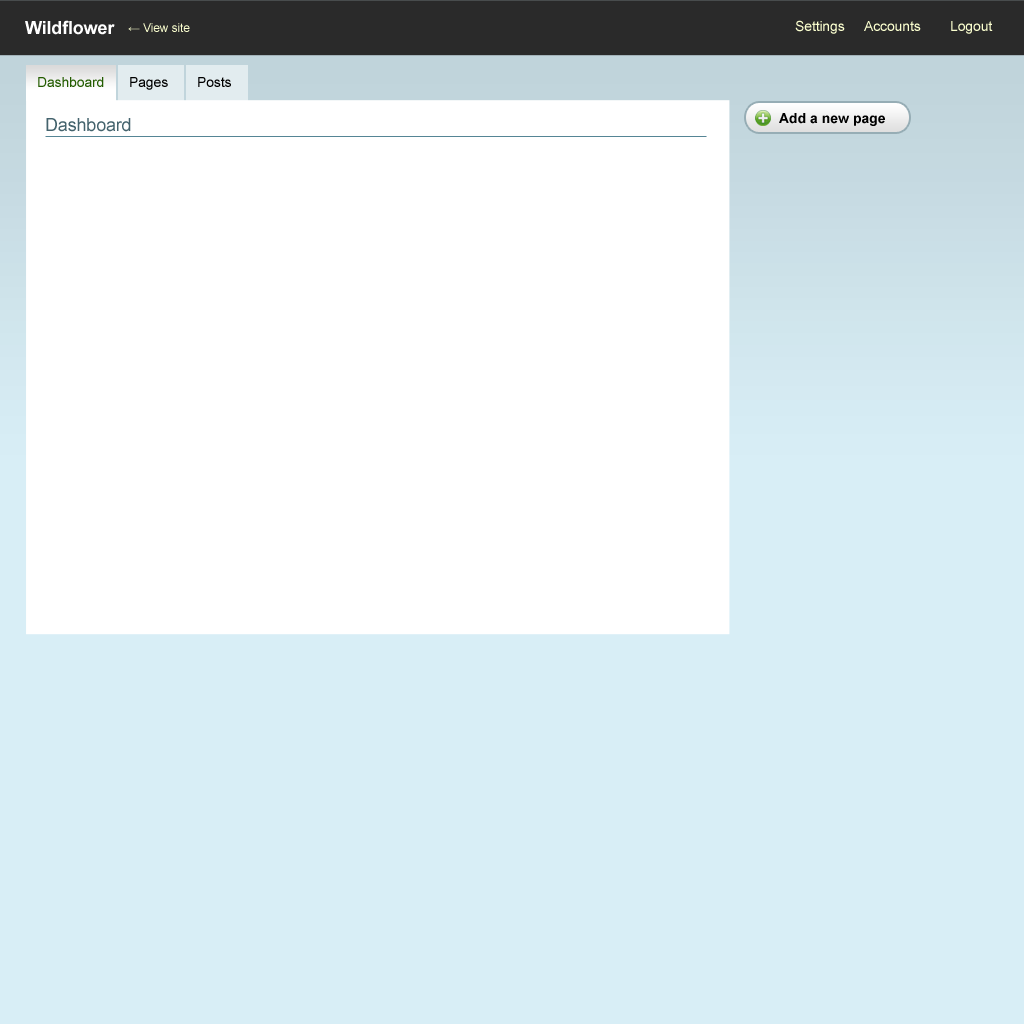
<style>
.page{position:relative;width:1024px;height:1024px;background:#d8eef6}
.page>*{position:absolute;margin:0}
.t1{font:18px "Arial-BoldMT";letter-spacing:-0.01em;color:#ffffff}
.t2{font:12px "ArialMT";letter-spacing:-0.01em;color:#fbffcf}
.t3{font:14px "ArialMT";letter-spacing:-0.01em;color:#fbffcf}
.t4{font:14px "ArialMT";letter-spacing:-0.01em;color:#235c00}
.t5{font:14px "ArialMT";letter-spacing:-0.01em;color:#000000}
.t6{font:14px "Arial-BoldMT";color:#000000}
.t7{font:18px "ArialMT";letter-spacing:-0.01em;color:#44636d}
</style>
<div class="page">
<p class="t1" style="left:25px;top:20px;width:90px;height:15px">Wildflower</p>
<p class="t2" style="left:128px;top:23px;width:62px;height:9px">← View site</p>
<p class="t3" style="left:795px;top:20px;width:50px;height:14px">Settings</p>
<p class="t3" style="left:864px;top:21px;width:57px;height:10px">Accounts</p>
<p class="t3" style="left:951px;top:21px;width:42px;height:13px">Logout</p>
<p class="t4" style="left:38px;top:77px;width:66px;height:10px">Dashboard</p>
<p class="t5" style="left:130px;top:77px;width:38px;height:13px">Pages</p>
<p class="t5" style="left:198px;top:77px;width:33px;height:10px">Posts</p>
<p class="t6" style="left:779px;top:113px;width:106px;height:13px">Add a new page</p>
<p class="t7" style="left:46px;top:118px;width:85px;height:14px">Dashboard</p>
</div>
